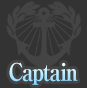
<style>
.page{position:relative;width:87px;height:88px;background:#333333}
.page>*{position:absolute;margin:0}
.t1{font:24px "RyuminPro-ExBold";letter-spacing:-0.08em;scale:0.9 1}
</style>
<div class="page">
<p class="t1" style="left:9px;top:62px;width:69px;height:23px">Captain</p>
</div>
